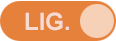
<style>
.page{position:relative;width:116px;height:41px;background:#e6813b}
.page>*{position:absolute;margin:0}
.t1{font:24px "Arial-BoldMT";color:#f7dbd1}
</style>
<div class="page">
<p class="t1" style="left:25px;top:12px;width:44px;height:19px">LIG.</p>
</div>
